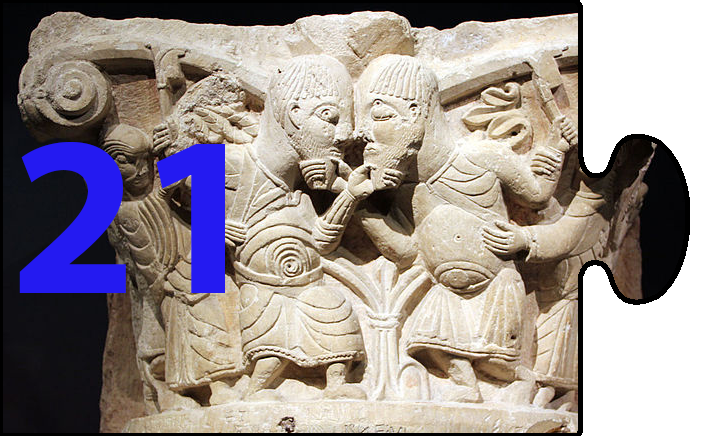
<style>
.page{position:relative;width:708px;height:436px}
.page>*{position:absolute;margin:0}
.t1{font:229.4px "MyriadPro-Bold";color:#241af1}
</style>
<div class="page">
<p class="t1" style="left:19px;top:142px;width:206px;height:151px">21</p>
</div>
